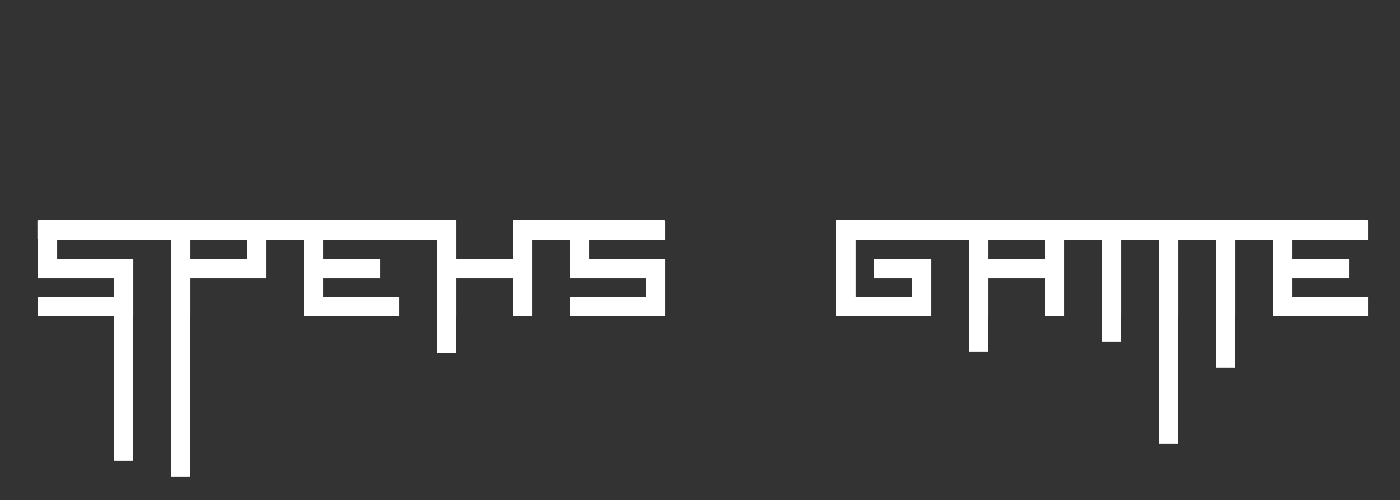
<style>
.page{position:relative;width:1400px;height:500px;background:#333333}
.page>*{position:absolute;margin:0}
.t1{font:152px "VirtualDJ";color:#ffffff}
</style>
<div class="page">
<p class="t1" style="left:38px;top:220px;width:1331px;height:96px">SPEHS GAME</p>
</div>
